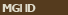
<style>
.page{position:relative;width:68px;height:15px;background:#553b1e}
.page>*{position:absolute;margin:0}
.t1{font:11px "Arial-BoldMT";letter-spacing:-0.08em;color:#dedbcb}
.t2{font:11px "Verdana-Bold";letter-spacing:-0.08em;color:#dedbcb}
</style>
<div class="page">
<p class="t1" style="left:2px;top:4px;width:34px;height:8px"><span class="t2">MG</span>I I<span class="t2">D</span></p>
</div>
